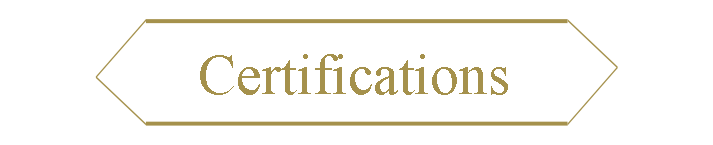
<style>
.page{position:relative;width:713px;height:145px;background:#ffffff}
.page>*{position:absolute;margin:0}
.t1{font:57.4px "TimesNewRomanPSMT";color:#a5914c}
</style>
<div class="page">
<p class="t1" style="left:200px;top:54px;width:308px;height:41px">Certifications</p>
</div>
